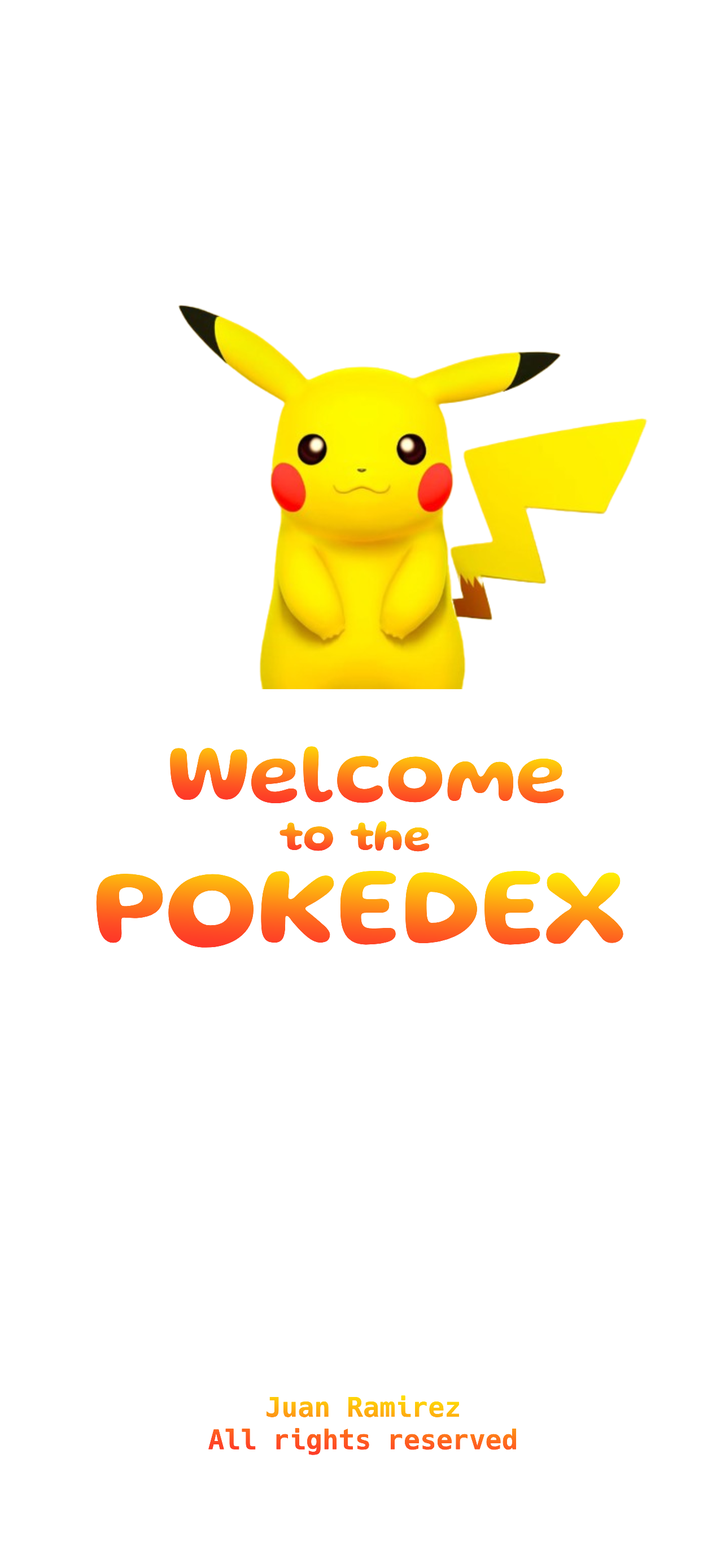
<style>
.page{position:relative;width:725px;height:1568px;background:#ffffff}
.page>*{position:absolute;margin:0}
.t1{font:84.7px "Gluten-SemiBold"}
.t2{font:45.2px "Gluten-SemiBold"}
.t3{font:112.9px "Gluten-SemiBold"}
.t4{font:27.1px "Hack-Bold"}
</style>
<div class="page">
<p class="t1" style="left:170px;top:746px;width:394px;height:57px">Welcome</p>
<p class="t2" style="left:279px;top:821px;width:151px;height:31px">to the</p>
<p class="t3" style="left:96px;top:870px;width:527px;height:78px">POKEDEX</p>
<p class="t4" style="left:208px;top:1395px;width:308px;height:60px;text-align:center">Juan Ramirez<br>All rights reserved</p>
</div>
